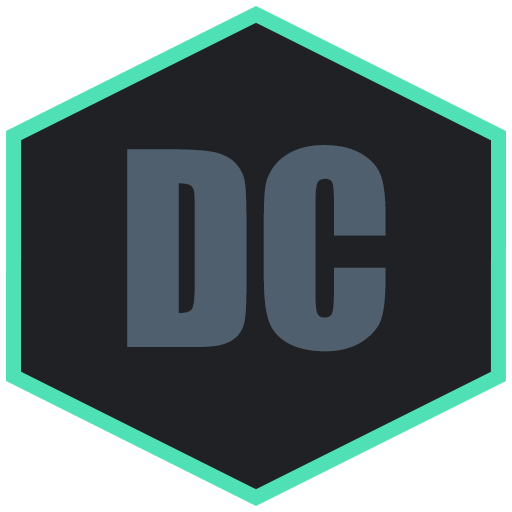
<style>
.page{position:relative;width:512px;height:512px;background:#202125}
.page>*{position:absolute;margin:0}
.t1{font:250px "Impact";color:#4f5f6d}
</style>
<div class="page">
<p class="t1" style="left:127px;top:145px;width:259px;height:207px">DC</p>
</div>
